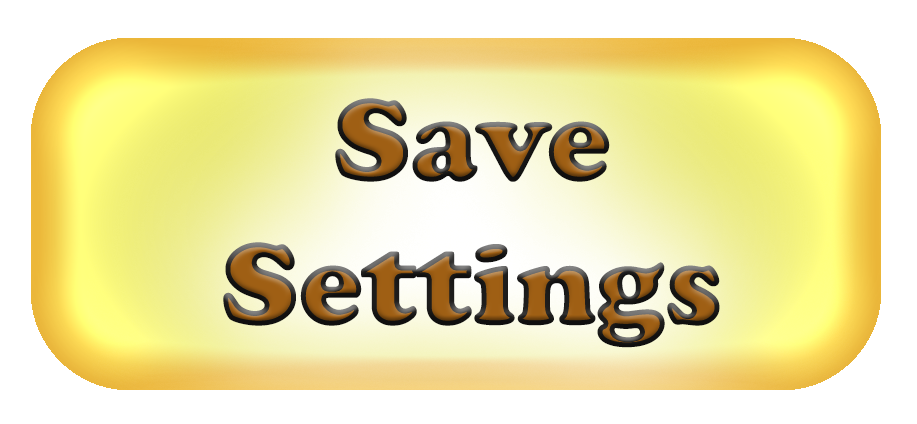
<style>
.page{position:relative;width:917px;height:424px;background:#ffffff}
.page>*{position:absolute;margin:0}
.t1{font:120px "CooperBlack"}
</style>
<div class="page">
<p class="t1" style="left:223px;top:98px;width:497px;height:250px;text-align:center">Save<br>Settings</p>
</div>
